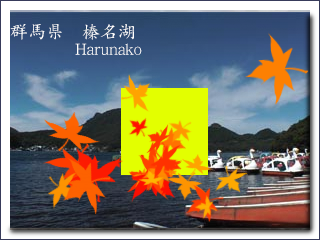
<style>
.page{position:relative;width:320px;height:240px}
.page>*{position:absolute;margin:0}
.t1{font:18px "DFKaiSho-Md-MP-RKSJ-H";color:#ffffff}
.t2{font:15px "DFKaiSho-Md-MP-RKSJ-H";color:#ffffff}
</style>
<div class="page">
<p class="t1" style="left:10px;top:24px;width:124px;height:16px">群馬県　榛名湖</p>
<p class="t2" style="left:75px;top:43px;width:67px;height:12px">Harunako</p>
</div>
